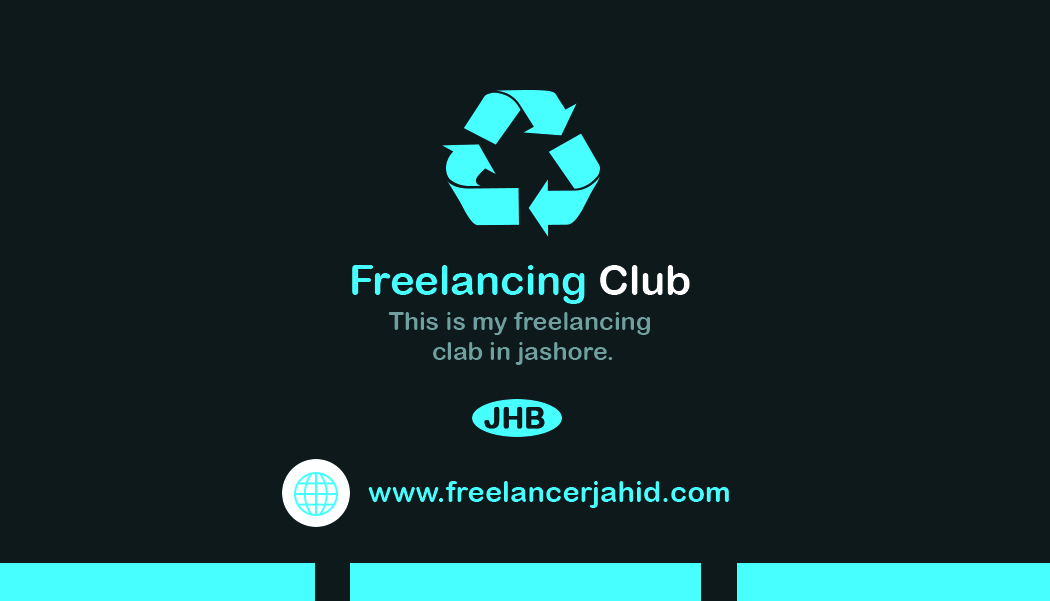
<style>
.page{position:relative;width:1050px;height:601px;background:#0e191b}
.page>*{position:absolute;margin:0}
.t1{font:41.7px "ArialRoundedMTBold";color:#47ffff}
.t2{font:41.7px "ArialRoundedMTBold";color:#ffffff}
.t3{font:25px "ArialRoundedMTBold";color:#6e9e9d}
.t4{font:29.2px "ArialRoundedMTBold";color:#0e191b;text-transform:uppercase;font-weight:bold}
.t5{font:29.2px "ArialRoundedMTBold";color:#47ffff}
</style>
<div class="page">
<p class="t1" style="left:352px;top:265px;width:338px;height:39px">Freelancing <span class="t2">Club</span></p>
<p class="t3" style="left:388px;top:312px;width:262px;height:53px;text-align:center">This is my freelancing<br> clab in jashore.</p>
<p class="t4" style="left:484px;top:407px;width:61px;height:22px">JHB</p>
<p class="t5" style="left:368px;top:481px;width:361px;height:27px">www.freelancerjahid.com</p>
</div>
